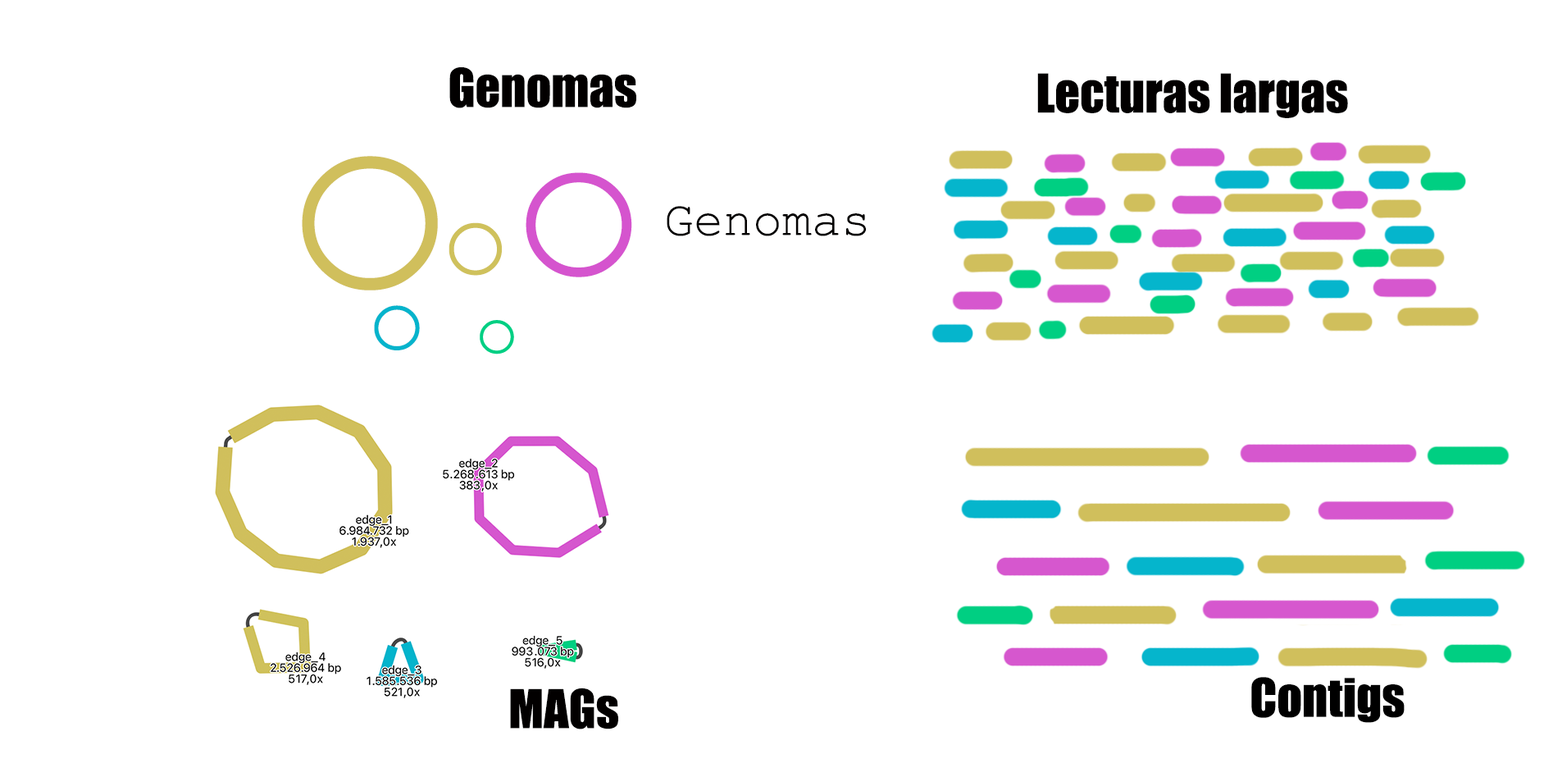
<style>
.page{position:relative;width:1553px;height:768px;background:#ffffff}
.page>*{position:absolute;margin:0}
.t1{font:49.2px "Impact";color:#020000}
.t2{font:295.3px "CourierNewPSMT";color:#d0bf5c}
.t3{font:114.8px "CourierNewPSMT";color:#cfc15c}
.t4{font:229.6px "CourierNewPSMT";color:#d554ce}
.t5{font:49.2px "CourierNewPSMT";color:#020000}
.t6{font:98.4px "CourierNewPSMT";color:#05b4cc}
.t7{font:49.2px "Impact";color:#000000}
</style>
<div class="page">
<p class="t1" style="left:449px;top:67px;width:187px;height:41px">Genomas</p>
<p class="t1" style="left:1037px;top:73px;width:311px;height:45px">Lecturas largas</p>
<p class="t2" style="left:302px;top:156px;width:136px;height:134px">o</p>
<p class="t3" style="left:449px;top:172px;width:183px;height:105px">o<span class="t4">o</span></p>
<p class="t5" style="left:667px;top:206px;width:199px;height:30px">Genomas</p>
<p class="t6" style="left:374px;top:305px;width:46px;height:45px">o</p>
<p class="t7" style="left:1252px;top:677px;width:153px;height:46px">Contigs</p>
<p class="t1" style="left:510px;top:687px;width:108px;height:42px">MAGs</p>
</div>
